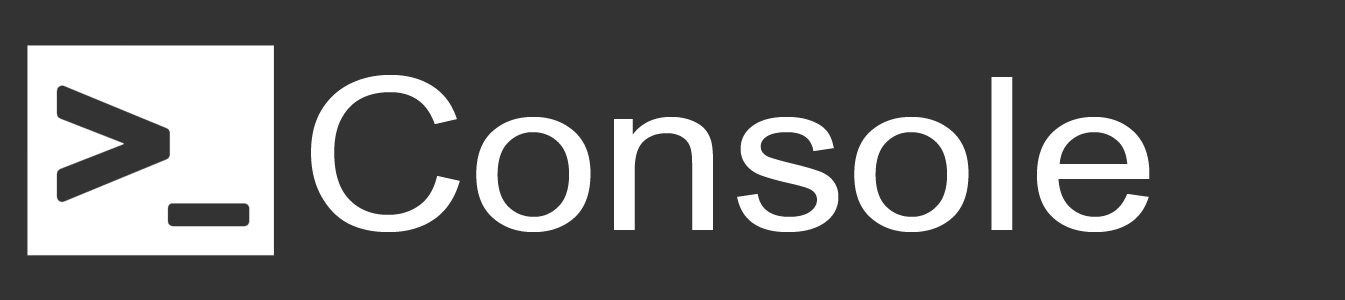
<style>
.page{position:relative;width:1345px;height:300px;background:#333333}
.page>*{position:absolute;margin:0}
.t1{font:214.4px "ArialNarrow";color:#ffffff;scale:1.33 1}
</style>
<div class="page">
<p class="t1" style="left:311px;top:75px;width:839px;height:157px">Console</p>
</div>
